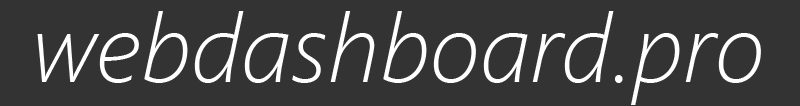
<style>
.page{position:relative;width:800px;height:106px;background:#333333}
.page>*{position:absolute;margin:0}
.t1{font:96px "SegoeUI-LightItalic";color:#ffffff}
</style>
<div class="page">
<p class="t1" style="left:37px;top:11px;width:724px;height:94px">webdashboard.pro</p>
</div>
